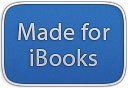
<style>
.page{position:relative;width:128px;height:88px}
.page>*{position:absolute;margin:0}
.t1{font:24px/26px "MyriadPro-Regular";letter-spacing:0.02em;color:#c9d6e5}
</style>
<div class="page">
<p class="t1" style="left:18px;top:23px;width:92px;height:43px;text-align:center">Made for<br>iBooks</p>
</div>
